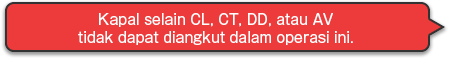
<style>
.page{position:relative;width:450px;height:58px;background:#ed3b3b}
.page>*{position:absolute;margin:0}
.t1{font:14px/18px "GothicMB101Pro-Regular";color:#ffffff}
</style>
<div class="page">
<p class="t1" style="left:78px;top:13px;width:275px;height:32px;text-align:center">Kapal selain CL, CT, DD, atau AV<br>tidak dapat diangkut dalam operasi ini.</p>
</div>
